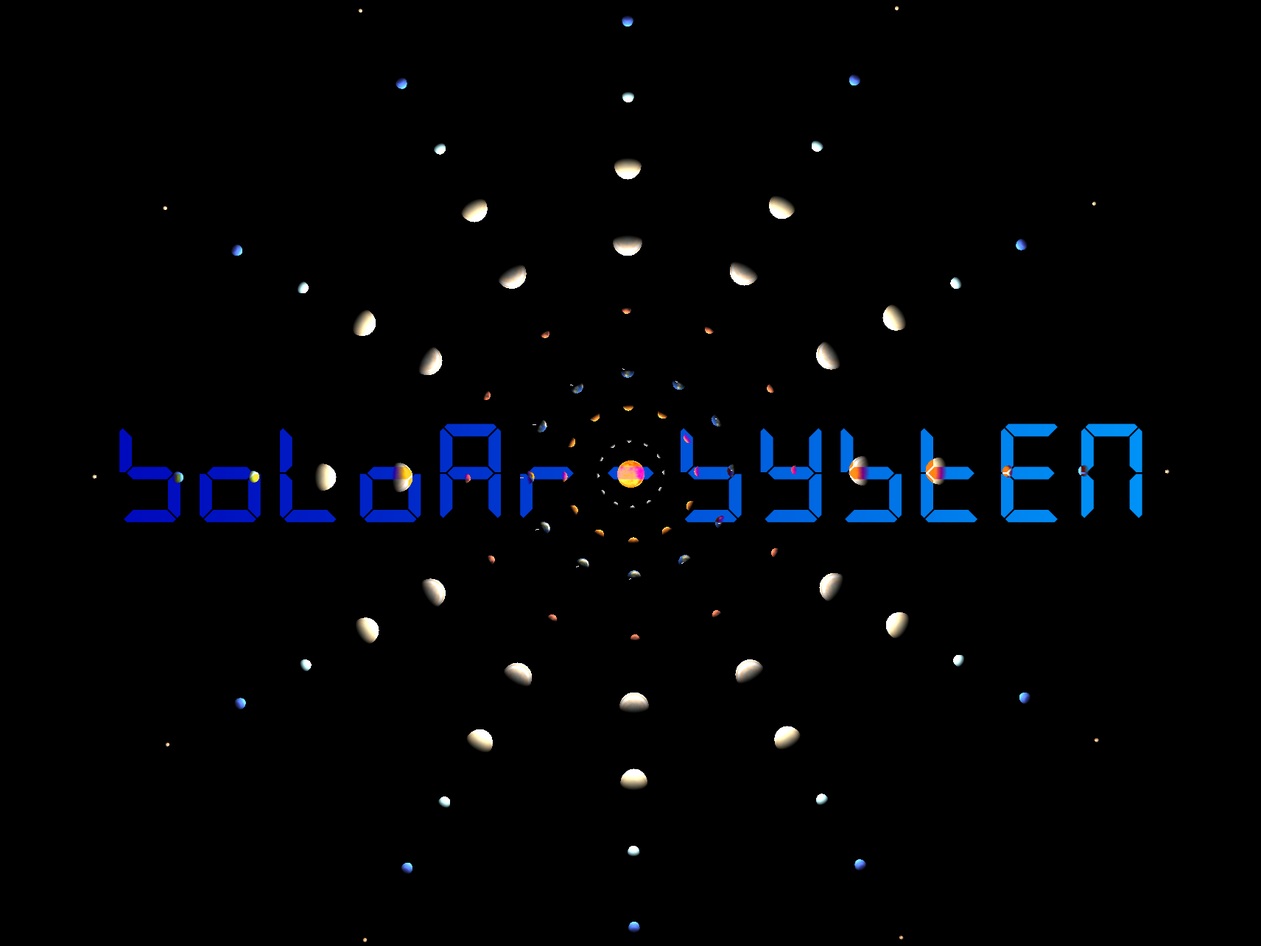
<style>
.page{position:relative;width:1261px;height:946px;background:#000000}
.page>*{position:absolute;margin:0}
.t1{font:98.2px "DSEG7Classic-Bold"}
</style>
<div class="page">
<p class="t1" style="left:119px;top:423px;width:1023px;height:99px">soloar-system</p>
</div>
